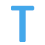
<style>
.page{position:relative;width:45px;height:45px;background:#ffffff}
.page>*{position:absolute;margin:0}
.t1{font:50px "Designosaur";color:#43a8eb}
</style>
<div class="page">
<p class="t1" style="left:11px;top:5px;width:24px;height:37px">T</p>
</div>
